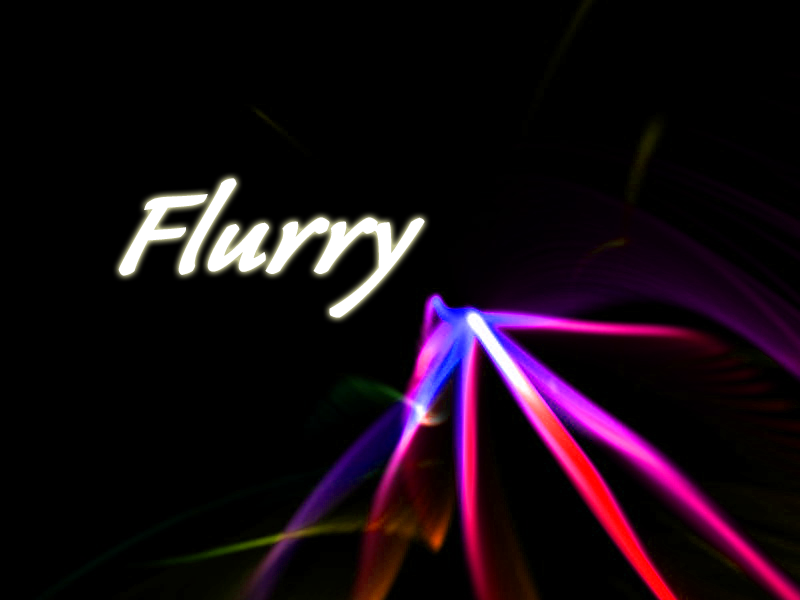
<style>
.page{position:relative;width:800px;height:600px;background:#000000}
.page>*{position:absolute;margin:0}
.t1{font:145px "CalibanStd";color:#ffffff;font-weight:bold;font-style:italic}
</style>
<div class="page">
<p class="t1" style="left:118px;top:178px;width:307px;height:140px">Flurry</p>
</div>
